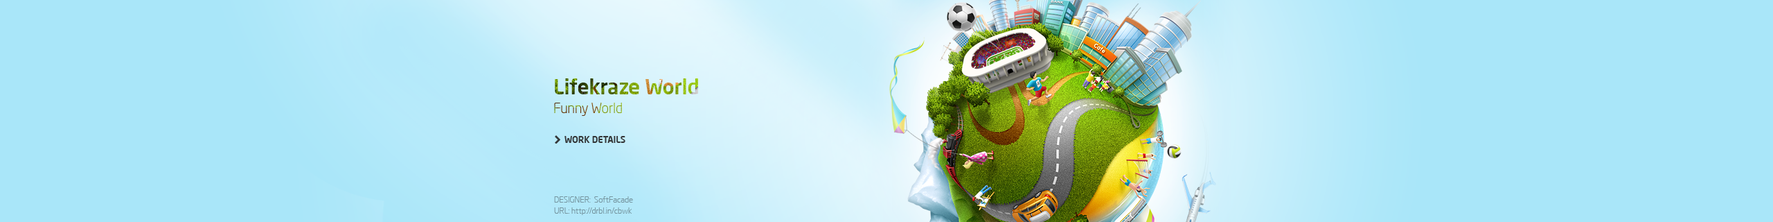
<style>
.page{position:relative;width:1773px;height:222px;background:#a9e6f9}
.page>*{position:absolute;margin:0}
.t1{font:20.8px "NeoSansPro-Medium";letter-spacing:-0.005em}
.t2{font:13.8px "NeoSansPro-Light";letter-spacing:-0.005em}
.t3{font:9px "NeoSansPro-Medium";letter-spacing:-0.005em;color:#262424}
.t4{font:8.3px "NeoSansPro-Light";letter-spacing:-0.005em;color:#7595a0}
</style>
<div class="page">
<p class="t1" style="left:555px;top:78px;width:143px;height:16px">Lifekraze World</p>
<p class="t2" style="left:554px;top:102px;width:68px;height:14px">Funny World</p>
<p class="t3" style="left:564px;top:136px;width:61px;height:7px;opacity:0.9">WORK DETAILS</p>
<p class="t4" style="left:554px;top:196px;width:79px;height:6px">DESIGNER:  SoftFacade</p>
<p class="t4" style="left:554px;top:207px;width:78px;height:8px">URL: http://drbl.in/cbwk</p>
</div>
